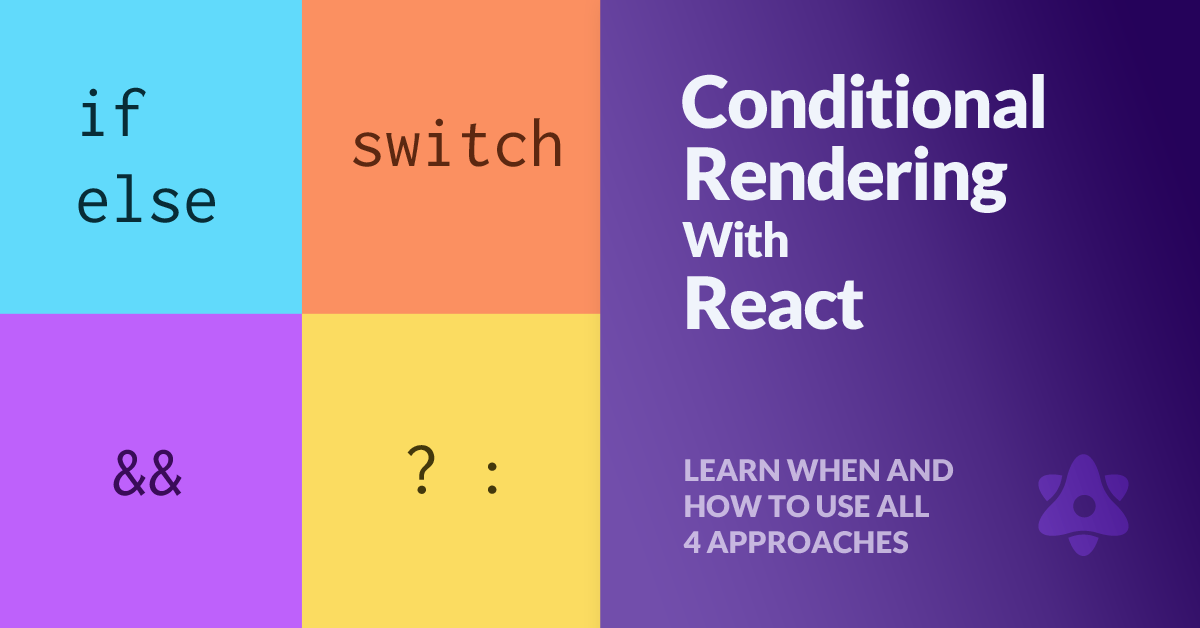
<style>
.page{position:relative;width:1200px;height:628px}
.page>*{position:absolute;margin:0}
.t1{font:72px/72px "Lato-Black";letter-spacing:-0.025em;color:#f0f4fb}
.t2{font:48px "Lato-Black";letter-spacing:-0.025em;color:#f0f4fb}
.t3{font:72px "Inconsolata";color:#082c36}
.t4{font:72px "Inconsolata";color:#5b2710}
.t5{font:72px "Inconsolata";color:#3a0c59}
.t6{font:72px "Inconsolata";color:#43380c}
.t7{font:30px "Lato-Black";color:#c5b5de}
</style>
<div class="page">
<p class="t1" style="left:682px;top:73px;width:362px;height:257px">Conditional<br>Rendering<br><span class="t2">With<br></span>React</p>
<p class="t3" style="left:78px;top:87px;width:137px;height:136px">if<br>else</p>
<p class="t4" style="left:353px;top:118px;width:208px;height:49px">switch</p>
<p class="t5" style="left:113px;top:449px;width:69px;height:47px">&amp;&amp;</p>
<p class="t6" style="left:407px;top:445px;width:90px;height:49px">? :</p>
<p class="t7" style="left:683px;top:459px;width:271px;height:95px">LEARN WHEN AND<br>HOW TO USE ALL<br>4 APPROACHES</p>
</div>
